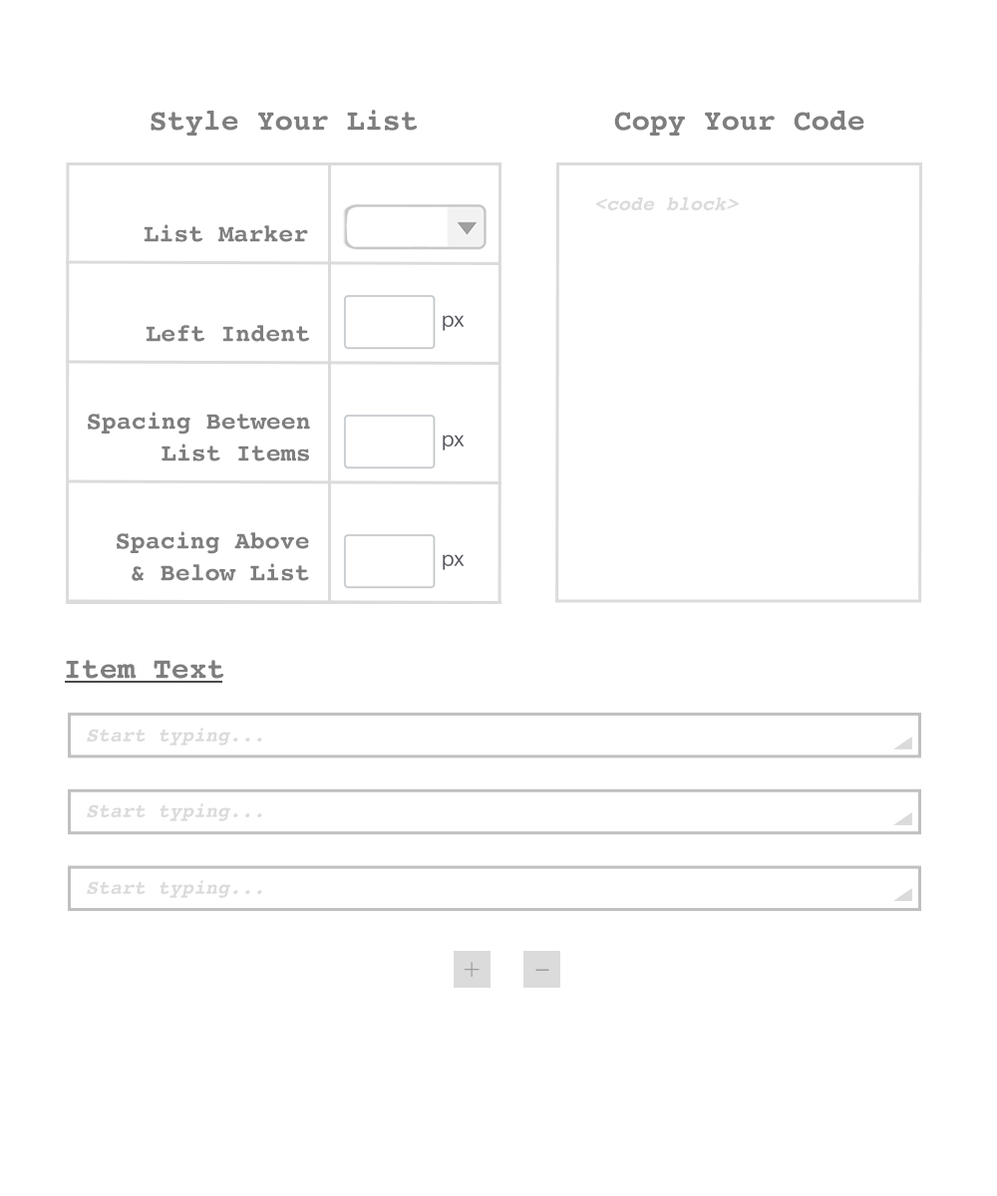
<style>
.page{position:relative;width:997px;height:1196px;background:#ffffff}
.page>*{position:absolute;margin:0}
.t1{font:29.9px "Courier-Bold";color:#7e7e7e}
.t2{font:19.9px "Courier-BoldOblique";color:#dbdbdb}
.t3{font:24.9px "Courier-Bold";color:#7e7e7e}
.t4{font:24.9px/31.9px "Courier-Bold";color:#7e7e7e}
.t5{font:19.9px "KozGoPr6N-Regular";color:#9c9c9c}
.t6{font:26.1px "KozGoPr6N-Regular";color:#9c9c9c}
</style>
<div class="page">
<p class="t1" style="left:151px;top:110px;width:267px;height:26px">Style Your List</p>
<p class="t1" style="left:614px;top:111px;width:250px;height:25px">Copy Your Code</p>
<p class="t2" style="left:595px;top:197px;width:144px;height:13px">&lt;code block&gt;</p>
<p class="t3" style="left:144px;top:224px;width:164px;height:18px">List Marker</p>
<p class="t3" style="left:146px;top:325px;width:163px;height:17px">Left Indent</p>
<p class="t4" style="left:88px;top:412px;width:222px;height:50px;text-align:right">Spacing Between<br>List Items</p>
<p class="t4" style="left:117px;top:531px;width:192px;height:50px;text-align:right">Spacing Above<br>&amp; Below List</p>
<p class="t1" style="left:66px;top:660px;width:158px;height:19px">Item Text</p>
<p class="t2" style="left:87px;top:728px;width:175px;height:18px">Start typing...</p>
<p class="t2" style="left:87px;top:803px;width:175px;height:18px">Start typing...</p>
<p class="t2" style="left:87px;top:880px;width:175px;height:18px">Start typing...</p>
<p class="t5" style="left:464px;top:962px;width:15px;height:15px">＋</p>
<p class="t6" style="left:535px;top:969px;width:14px;height:2px">–</p>
</div>
